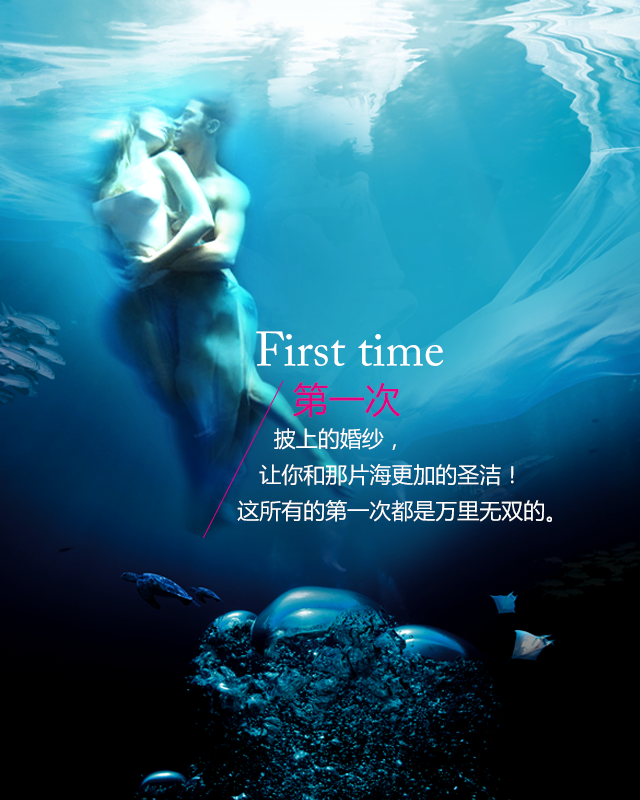
<style>
.page{position:relative;width:640px;height:800px}
.page>*{position:absolute;margin:0}
.t1{font:48px "ACaslonPro-Regular";color:#ffffff}
.t2{font:36px "MicrosoftYaHei";color:#e4007f}
.t3{font:22px/36px "MicrosoftYaHei";color:#ffffff}
</style>
<div class="page">
<p class="t1" style="left:256px;top:331px;width:188px;height:35px">First time</p>
<p class="t2" style="left:293px;top:382px;width:107px;height:36px">第一次</p>
<p class="t3" style="left:237px;top:428px;width:315px;height:94px">披上的婚纱，<br>   让你和那片海更加的圣洁！<br>这所有的第一次都是万里无双的。</p>
</div>
